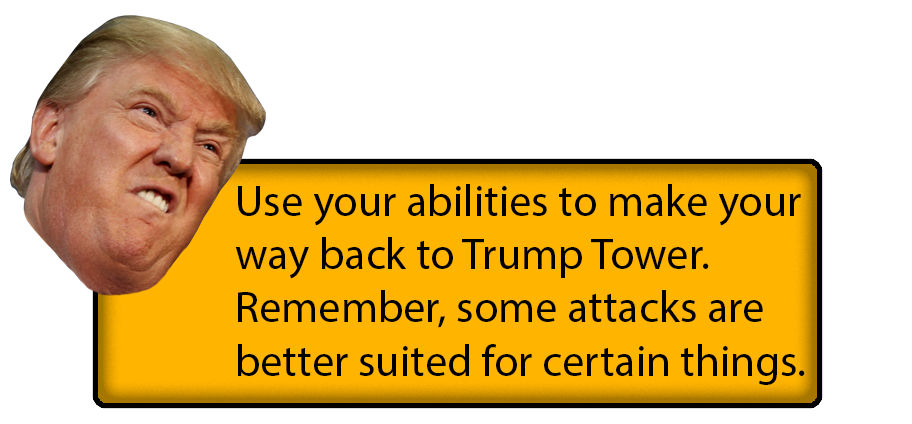
<style>
.page{position:relative;width:912px;height:424px;background:#ffffff}
.page>*{position:absolute;margin:0}
.t1{font:44.4px "MyriadPro-Regular";color:#000000}
</style>
<div class="page">
<p class="t1" style="left:235px;top:184px;width:570px;height:201px">Use your abilities to make your<br>way back to Trump Tower. <br>Remember, some attacks are <br>better suited for certain things.</p>
</div>
